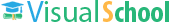
<style>
.page{position:relative;width:174px;height:23px;background:#ffffff}
.page>*{position:absolute;margin:0}
.t1{font:30px "MyriadPro-Regular";color:#28b779}
.t2{font:30px "MyriadPro-Regular";color:#27a9e3}
.t3{font:30px "MyriadPro-BoldCond";color:#28b779}
.t4{font:30px "MyriadPro-BoldCond";color:#ffb848}
</style>
<div class="page">
<p class="t1" style="left:27px;top:0px;width:71px;height:22px"><span class="t2">V</span>isual</p>
<p class="t3" style="left:102px;top:1px;width:67px;height:21px"><span class="t4">S</span>chool</p>
</div>
